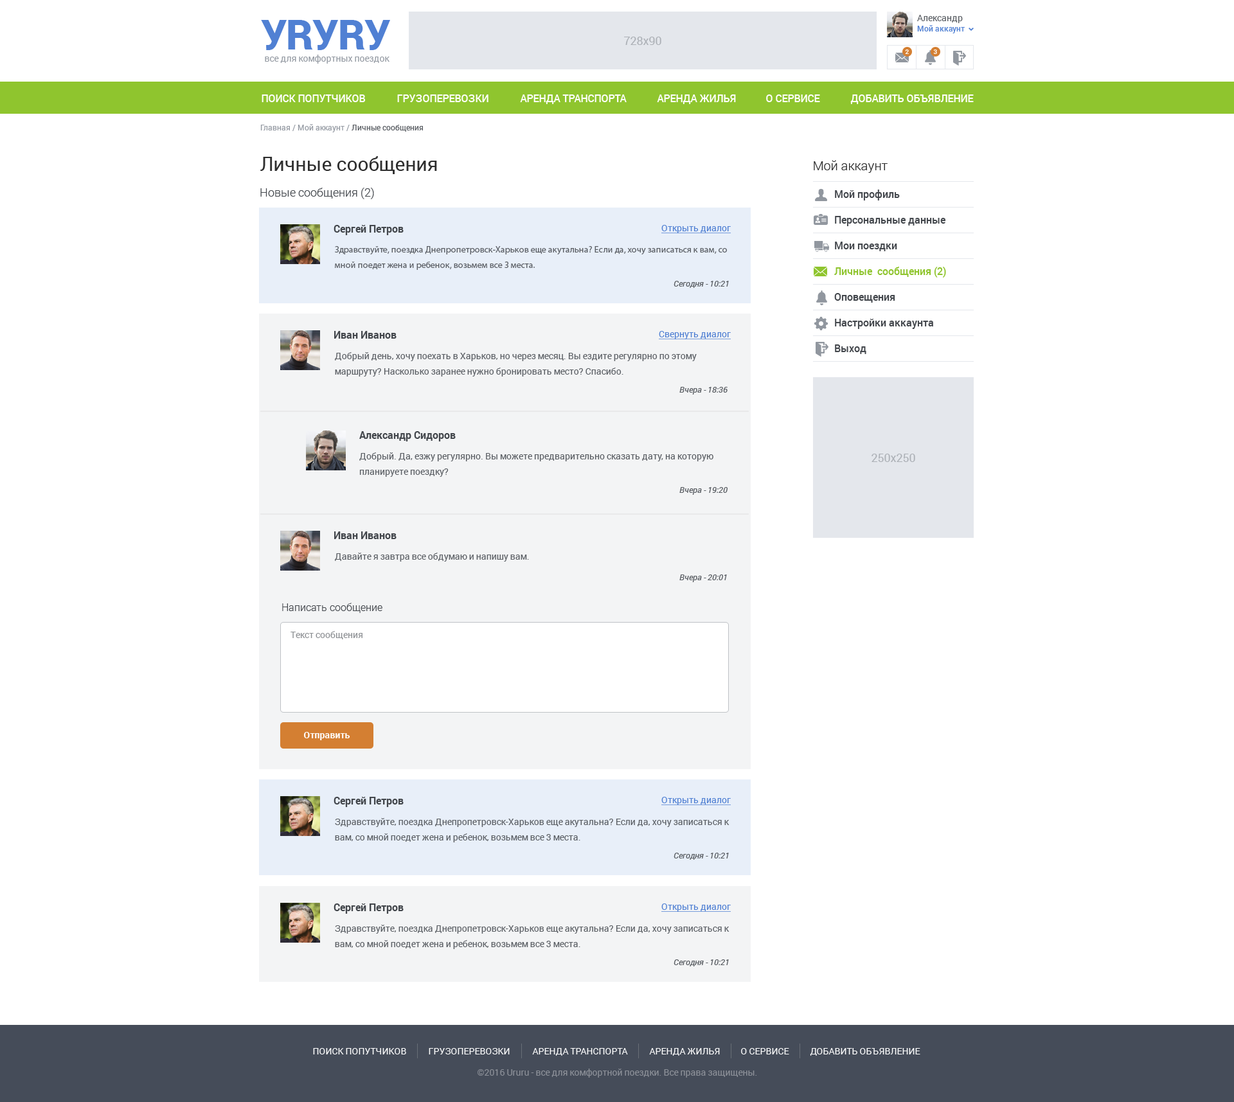
<style>
.page{position:relative;width:1234px;height:1102px;background:#ffffff}
.page>*{position:absolute;margin:0}
.t1{font:9px "Roboto-Regular";color:#5a5e64}
.t2{font:41.1px "Roboto-Black";letter-spacing:-0.01em;color:#5080d3}
.t3{font:7.7px "Roboto-Medium";color:#5080d3}
.t4{font:11.6px "Roboto-Regular";color:#adb1b6}
.t5{font:6.4px "Roboto-Medium";color:#ffffff}
.t6{font:9px "Roboto-Regular";color:#959ba3}
.t7{font:10.3px "Roboto-Medium";color:#ffffff;text-transform:uppercase}
.t8{font:7.7px "Roboto-Regular";color:#959ba3}
.t9{font:7.7px "Roboto-Regular";color:#5a5e64}
.t10{font:19.3px "Roboto-Regular";color:#2e2e2e}
.t11{font:12.9px "Roboto-Light";color:#2e2e2e}
.t12{font:11.6px "Roboto-Light";color:#43474c}
.t13{font:10.3px "Roboto-Medium";color:#43474c}
.t14{font:10.3px "Roboto-Bold";color:#43474c}
.t15{font:9px "Roboto-Regular";color:#5080d3;text-decoration:underline}
.t16{font:9px/15.4px "MyriadPro-Regular";color:#5a5e64}
.t17{font:10.3px "Roboto-Medium";color:#8fc52e}
.t18{font:8.4px "Roboto-Italic";color:#5a5e64}
.t19{font:9px/15.4px "Roboto-Regular";color:#5a5e64}
.t20{font:10.3px "Roboto-Light";color:#43474c}
.t21{font:9px "Roboto-Regular";color:#8d9094}
.t22{font:9px "Roboto-Bold";color:#ffffff}
.t23{font:9px "Roboto-Regular";color:#ffffff;text-transform:uppercase}
.t24{font:9px "Roboto-Regular";color:#8d9199}
</style>
<div class="page">
<p class="t1" style="left:917px;top:15px;width:46px;height:8px">Александр</p>
<p class="t2" style="left:261px;top:20px;width:129px;height:30px">УRУRУ</p>
<p class="t3" style="left:917px;top:25px;width:48px;height:8px">Мой аккаунт</p>
<p class="t4" style="left:624px;top:37px;width:38px;height:8px">728x90</p>
<p class="t5" style="left:905px;top:50px;width:4px;height:4px">2</p>
<p class="t5" style="left:933px;top:50px;width:4px;height:4px">3</p>
<p class="t6" style="left:265px;top:55px;width:125px;height:9px">все для комфортных поездок</p>
<p class="t7" style="left:262px;top:94px;width:104px;height:8px">Поиск попутчиков</p>
<p class="t7" style="left:397px;top:94px;width:92px;height:8px">грузоперевозки</p>
<p class="t7" style="left:520px;top:94px;width:107px;height:10px">Аренда транспорта</p>
<p class="t7" style="left:657px;top:94px;width:79px;height:10px">Аренда жилья</p>
<p class="t7" style="left:766px;top:94px;width:54px;height:8px">о сервисе</p>
<p class="t7" style="left:851px;top:94px;width:123px;height:10px">добавить объявление</p>
<p class="t8" style="left:260px;top:124px;width:163px;height:8px">Главная / Мой аккаунт / <span class="t9">Личные сообщения</span></p>
<p class="t10" style="left:260px;top:156px;width:177px;height:18px">Личные сообщения</p>
<p class="t11" style="left:814px;top:160px;width:74px;height:13px">Мой аккаунт</p>
<p class="t12" style="left:260px;top:188px;width:114px;height:11px">Новые сообщения (2)</p>
<p class="t13" style="left:835px;top:190px;width:65px;height:11px">Мой профиль</p>
<p class="t13" style="left:835px;top:216px;width:111px;height:10px">Персональные данные</p>
<p class="t14" style="left:334px;top:225px;width:70px;height:10px">Сергей Петров</p>
<p class="t15" style="left:662px;top:225px;width:69px;height:8px">Открыть диалог</p>
<p class="t13" style="left:835px;top:242px;width:62px;height:9px">Мои поездки</p>
<p class="t16" style="left:335px;top:246px;width:392px;height:24px">Здравствуйте, поездка Днепропетровск-Харьков еще акутальна? Если да, хочу записаться к вам, со мной поедет жена и ребенок, возьмем все 3 места.</p>
<p class="t17" style="left:834px;top:267px;width:112px;height:11px">Личные  сообщения (2)</p>
<p class="t18" style="left:674px;top:281px;width:55px;height:7px">Сегодня - 10:21</p>
<p class="t13" style="left:834px;top:293px;width:62px;height:10px">Оповещения</p>
<p class="t13" style="left:835px;top:319px;width:98px;height:10px">Настройки аккаунта</p>
<p class="t14" style="left:334px;top:331px;width:63px;height:8px">Иван Иванов</p>
<p class="t15" style="left:659px;top:331px;width:72px;height:8px">Свернуть диалог</p>
<p class="t19" style="left:335px;top:352px;width:362px;height:25px">Добрый день, хочу поехать в Харьков, но через месяц. Вы ездите регулярно по этому маршруту? Насколько заранее нужно бронировать место? Спасибо.</p>
<p class="t13" style="left:835px;top:345px;width:32px;height:9px">Выход</p>
<p class="t18" style="left:680px;top:387px;width:48px;height:8px">Вчера - 18:36</p>
<p class="t14" style="left:359px;top:431px;width:97px;height:11px">Александр Сидоров</p>
<p class="t19" style="left:359px;top:453px;width:355px;height:24px">Добрый. Да, езжу регулярно. Вы можете предварительно сказать дату, на которую планируете поездку?</p>
<p class="t4" style="left:872px;top:454px;width:43px;height:8px">250х250</p>
<p class="t18" style="left:680px;top:487px;width:48px;height:8px">Вчера - 19:20</p>
<p class="t14" style="left:334px;top:532px;width:63px;height:7px">Иван Иванов</p>
<p class="t1" style="left:335px;top:553px;width:194px;height:9px">Давайте я завтра все обдумаю и напишу вам.</p>
<p class="t18" style="left:680px;top:575px;width:47px;height:7px">Вчера - 20:01</p>
<p class="t20" style="left:282px;top:603px;width:100px;height:10px">Написать сообщение</p>
<p class="t21" style="left:291px;top:631px;width:72px;height:9px">Текст сообщения</p>
<p class="t22" style="left:304px;top:732px;width:46px;height:9px">Отправить</p>
<p class="t14" style="left:334px;top:797px;width:70px;height:10px">Сергей Петров</p>
<p class="t15" style="left:662px;top:797px;width:69px;height:9px">Открыть диалог</p>
<p class="t19" style="left:335px;top:818px;width:395px;height:25px">Здравствуйте, поездка Днепропетровск-Харьков еще акутальна? Если да, хочу записаться к вам, со мной поедет жена и ребенок, возьмем все 3 места.</p>
<p class="t18" style="left:674px;top:853px;width:55px;height:7px">Сегодня - 10:21</p>
<p class="t14" style="left:334px;top:904px;width:70px;height:10px">Сергей Петров</p>
<p class="t15" style="left:662px;top:904px;width:69px;height:8px">Открыть диалог</p>
<p class="t19" style="left:335px;top:925px;width:395px;height:25px">Здравствуйте, поездка Днепропетровск-Харьков еще акутальна? Если да, хочу записаться к вам, со мной поедет жена и ребенок, возьмем все 3 места.</p>
<p class="t18" style="left:674px;top:960px;width:55px;height:7px">Сегодня - 10:21</p>
<p class="t23" style="left:313px;top:1048px;width:93px;height:7px">Поиск попутчиков</p>
<p class="t23" style="left:429px;top:1048px;width:81px;height:7px">грузоперевозки</p>
<p class="t23" style="left:532px;top:1048px;width:96px;height:8px">Аренда транспорта</p>
<p class="t23" style="left:649px;top:1048px;width:71px;height:8px">Аренда жилья</p>
<p class="t23" style="left:741px;top:1048px;width:48px;height:7px">о сервисе</p>
<p class="t23" style="left:810px;top:1048px;width:111px;height:8px">добавить объявление</p>
<p class="t24" style="left:478px;top:1069px;width:279px;height:9px">©2016 Ururu - все для комфортной поездки. Все права защищены.</p>
</div>
